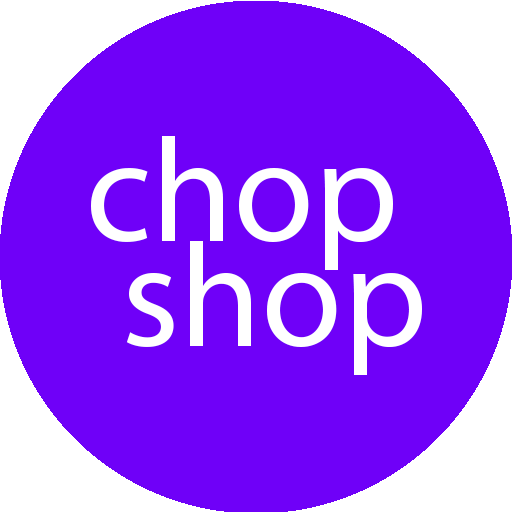
<style>
.page{position:relative;width:512px;height:512px;background:#6f00f8}
.page>*{position:absolute;margin:0}
.t1{font:148px/105px "MyriadPro-Regular";color:#ffffff}
</style>
<div class="page">
<p class="t1" style="left:91px;top:136px;width:331px;height:239px">chop<br> shop</p>
</div>
